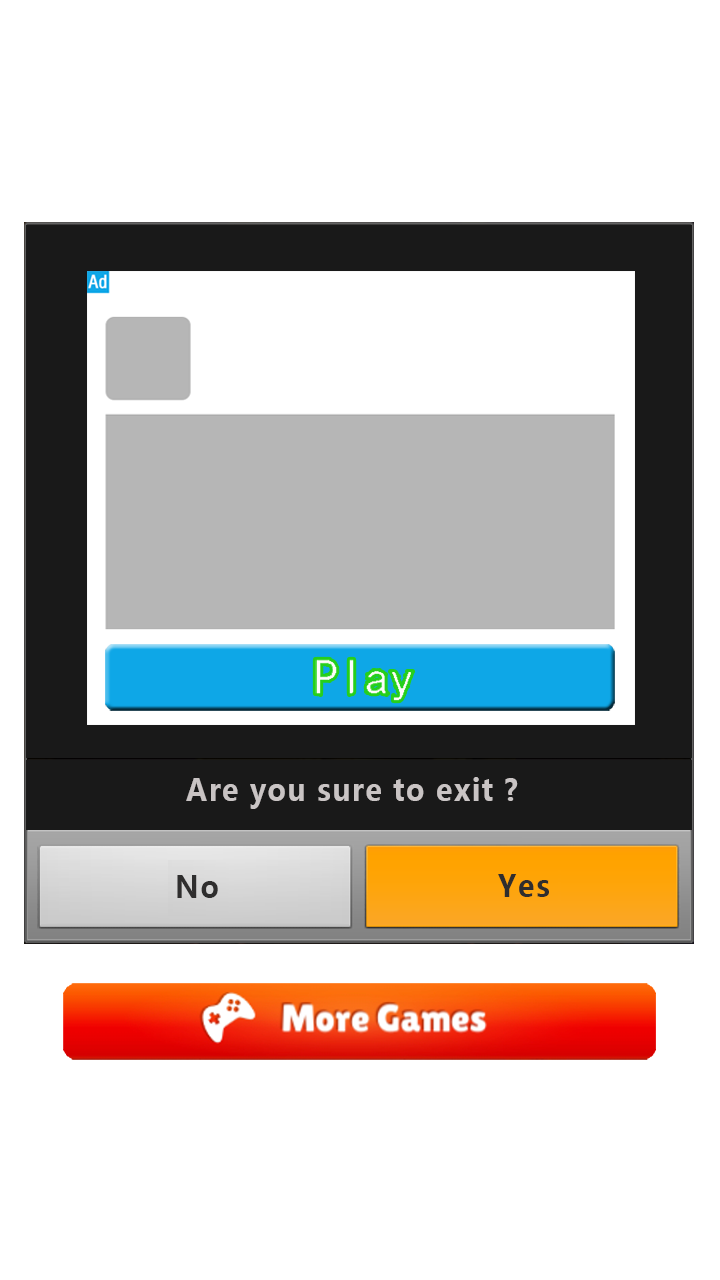
<style>
.page{position:relative;width:720px;height:1280px;background:#ffffff}
.page>*{position:absolute;margin:0}
.t1{font:30px "MicrosoftYaHei-Bold";letter-spacing:0.045em;color:#c9c4c4;scale:0.95 1}
.t2{font:30px "MicrosoftYaHei-Bold";letter-spacing:0.045em;color:#2f2e2e;scale:0.95 1}
</style>
<div class="page">
<p class="t1" style="left:186px;top:777px;width:332px;height:32px">Are you sure to exit ?</p>
<p class="t2" style="left:177px;top:875px;width:41px;height:23px">No</p>
<p class="t2" style="left:498px;top:874px;width:51px;height:23px">Yes</p>
</div>
